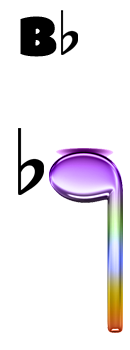
<style>
.page{position:relative;width:130px;height:350px;background:#ffffff}
.page>*{position:absolute;margin:0}
.t1{font:54px "LuckiestGuy-Regular";letter-spacing:0.005em;color:#000000;font-weight:bold;scale:1.11 1}
</style>
<div class="page">
<p class="t1" style="left:20px;top:16px;width:37px;height:41px">B</p>
</div>
